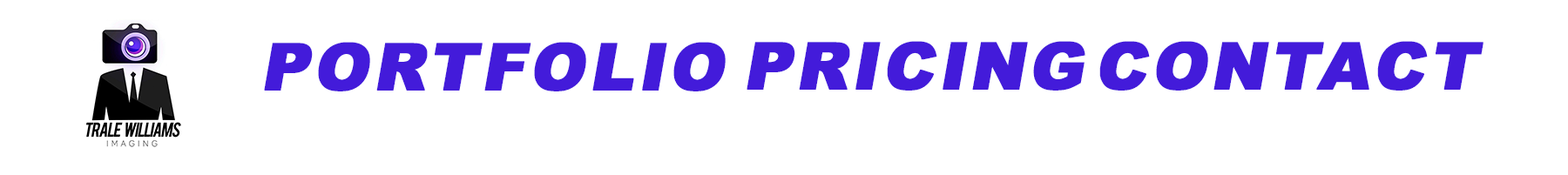
<style>
.page{position:relative;width:1568px;height:175px;background:#ffffff}
.page>*{position:absolute;margin:0}
.t1{font:65.3px "Arial-Black";letter-spacing:0.05em;color:#431bda;font-weight:bold;font-style:italic}
</style>
<div class="page">
<p class="t1" style="left:264px;top:42px;width:462px;height:49px">PORTFOLIO</p>
<p class="t1" style="left:747px;top:41px;width:338px;height:50px">PRICING</p>
<p class="t1" style="left:1099px;top:41px;width:385px;height:50px">CONTACT</p>
</div>
